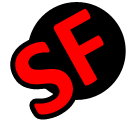
<style>
.page{position:relative;width:128px;height:128px;background:#ffffff}
.page>*{position:absolute;margin:0}
.t1{font:108.4px "Calibri-Bold";color:#ff0000}
</style>
<div class="page">
<p class="t1" style="left:53px;top:8px;width:51px;height:78px;rotate:-29deg">F</p>
<p class="t1" style="left:15px;top:41px;width:58px;height:74px;rotate:-29deg">S</p>
</div>
